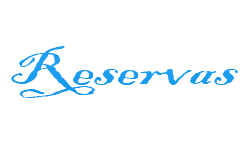
<style>
.page{position:relative;width:250px;height:167px;background:#ffffff}
.page>*{position:absolute;margin:0}
.t1{font:48.7px "BlackadderITC-Regular";color:#1a9cef;scale:1.5 1}
</style>
<div class="page">
<p class="t1" style="left:11px;top:46px;width:227px;height:52px">Reservas</p>
</div>
